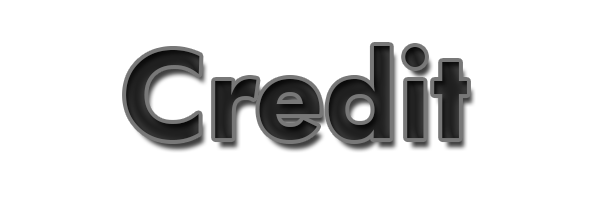
<style>
.page{position:relative;width:600px;height:200px;background:#ffffff}
.page>*{position:absolute;margin:0}
.t1{font:120px "FuturaBT-Heavy";color:#212121}
</style>
<div class="page">
<p class="t1" style="left:126px;top:46px;width:341px;height:94px">Credit</p>
</div>
